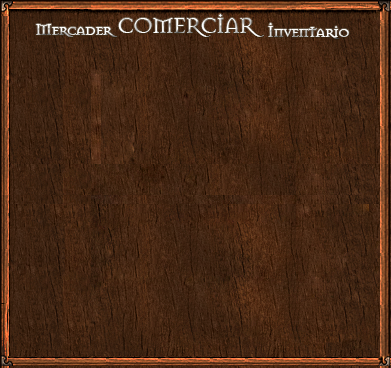
<style>
.page{position:relative;width:391px;height:368px}
.page>*{position:absolute;margin:0}
.t1{font:22.8px "Mason-Regular";letter-spacing:-0.06em}
.t2{font:18px "Mason-Regular";letter-spacing:-0.06em}
</style>
<div class="page">
<p class="t1" style="left:118px;top:14px;width:146px;height:23px">COMERCIAR</p>
<p class="t2" style="left:36px;top:24px;width:82px;height:13px">Mercader</p>
<p class="t2" style="left:268px;top:23px;width:81px;height:16px">Inventario</p>
</div>
